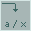
<style>
.page{position:relative;width:31px;height:31px;background:#a7b6b5}
.page>*{position:absolute;margin:0}
.t1{font:10px "rktr6cd";color:#3e6764}
</style>
<div class="page">
<p class="t1" style="left:5px;top:20px;width:21px;height:8px">a / x</p>
</div>
